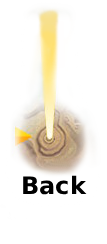
<style>
.page{position:relative;width:107px;height:244px;background:#ffffff}
.page>*{position:absolute;margin:0}
.t1{font:24px "DejaVuSans-Bold";color:#000000}
</style>
<div class="page">
<p class="t1" style="left:23px;top:175px;width:64px;height:20px">Back</p>
</div>
